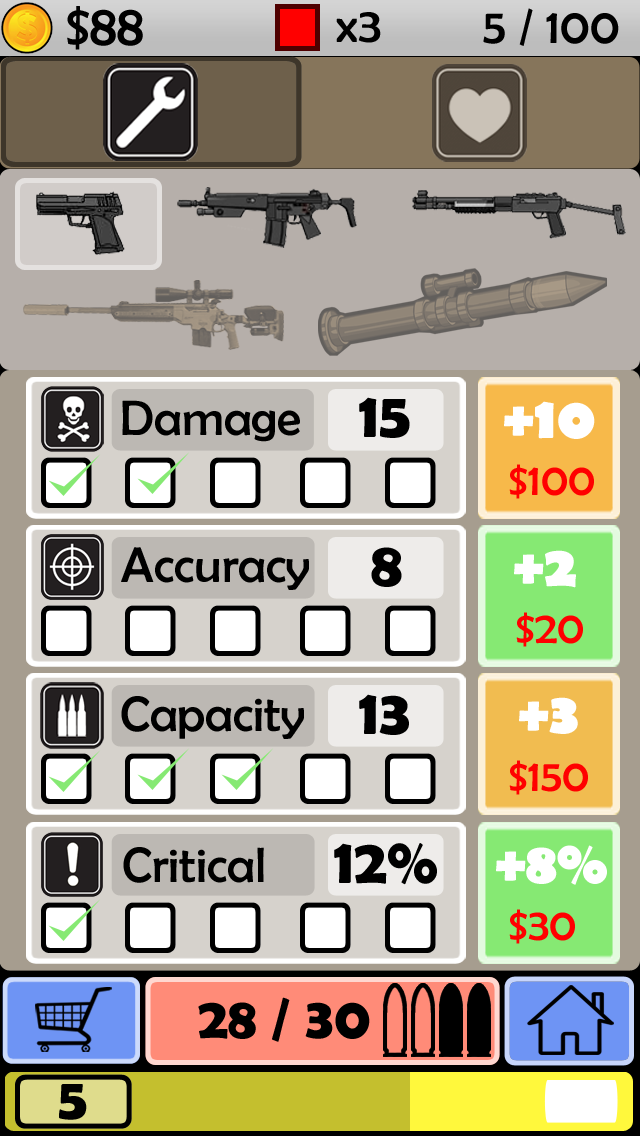
<style>
.page{position:relative;width:640px;height:1136px}
.page>*{position:absolute;margin:0}
.t1{font:58.3px "BerlinSansFB-Reg";color:#000000}
.t2{font:50px "BerlinSansFB-Reg";color:#000000}
.t3{font:63.5px "BerlinSansFBDemi-Bold";color:#000000}
.t4{font:58.3px "BerlinSansFB-Bold";color:#ffffff}
.t5{font:45.8px "BerlinSansFB-Reg";color:#ff0000}
.t6{font:58.3px "BerlinSansFBDemi-Bold";color:#000000}
</style>
<div class="page">
<p class="t1" style="left:67px;top:6px;width:76px;height:44px">$88</p>
<p class="t2" style="left:336px;top:12px;width:45px;height:31px">x3</p>
<p class="t2" style="left:483px;top:8px;width:136px;height:38px">5 / 100</p>
<p class="t2" style="left:122px;top:400px;width:178px;height:42px">Damage</p>
<p class="t3" style="left:359px;top:397px;width:51px;height:41px">15</p>
<p class="t4" style="left:504px;top:401px;width:91px;height:38px">+10</p>
<p class="t5" style="left:509px;top:464px;width:85px;height:35px">$100</p>
<p class="t2" style="left:121px;top:547px;width:188px;height:43px">Accuracy</p>
<p class="t3" style="left:371px;top:547px;width:31px;height:40px">8</p>
<p class="t4" style="left:514px;top:550px;width:62px;height:38px">+2</p>
<p class="t5" style="left:516px;top:612px;width:67px;height:35px">$20</p>
<p class="t2" style="left:121px;top:696px;width:183px;height:43px">Capacity</p>
<p class="t3" style="left:359px;top:694px;width:50px;height:41px">13</p>
<p class="t4" style="left:519px;top:697px;width:59px;height:37px">+3</p>
<p class="t5" style="left:509px;top:760px;width:79px;height:35px">$150</p>
<p class="t3" style="left:334px;top:843px;width:103px;height:42px">12%</p>
<p class="t4" style="left:496px;top:845px;width:111px;height:40px">+8%</p>
<p class="t2" style="left:123px;top:847px;width:141px;height:36px">Critical</p>
<p class="t5" style="left:509px;top:909px;width:66px;height:35px">$30</p>
<p class="t6" style="left:198px;top:997px;width:172px;height:45px">28 / 30</p>
<p class="t6" style="left:59px;top:1084px;width:28px;height:36px">5</p>
</div>
